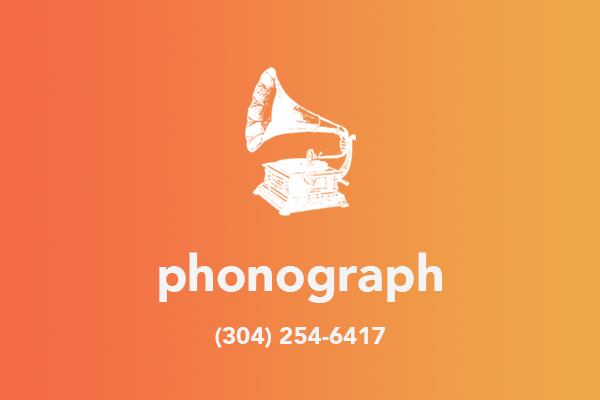
<style>
.page{position:relative;width:600px;height:400px}
.page>*{position:absolute;margin:0}
.t1{font:50px "Avenir-Black";color:#f4f4f4}
.t2{font:24px "Avenir-Black";color:#f4f4f4}
</style>
<div class="page">
<p class="t1" style="left:159px;top:252px;width:283px;height:51px">phonograph</p>
<p class="t2" style="left:215px;top:327px;width:170px;height:21px">(304) 254-6417</p>
</div>
